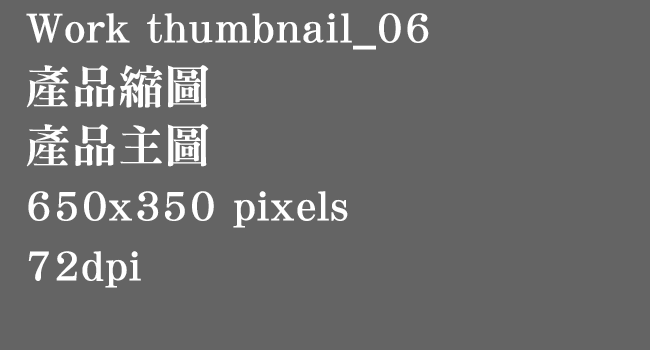
<style>
.page{position:relative;width:650px;height:350px;background:#646464}
.page>*{position:absolute;margin:0}
.t1{font:46.2px/59.3px "DFMingStd-W9";color:#ffffff}
</style>
<div class="page">
<p class="t1" style="left:26px;top:13px;width:403px;height:275px">Work thumbnail_06<br>產品縮圖<br>產品主圖<br>650x350 pixels<br>72dpi</p>
</div>
